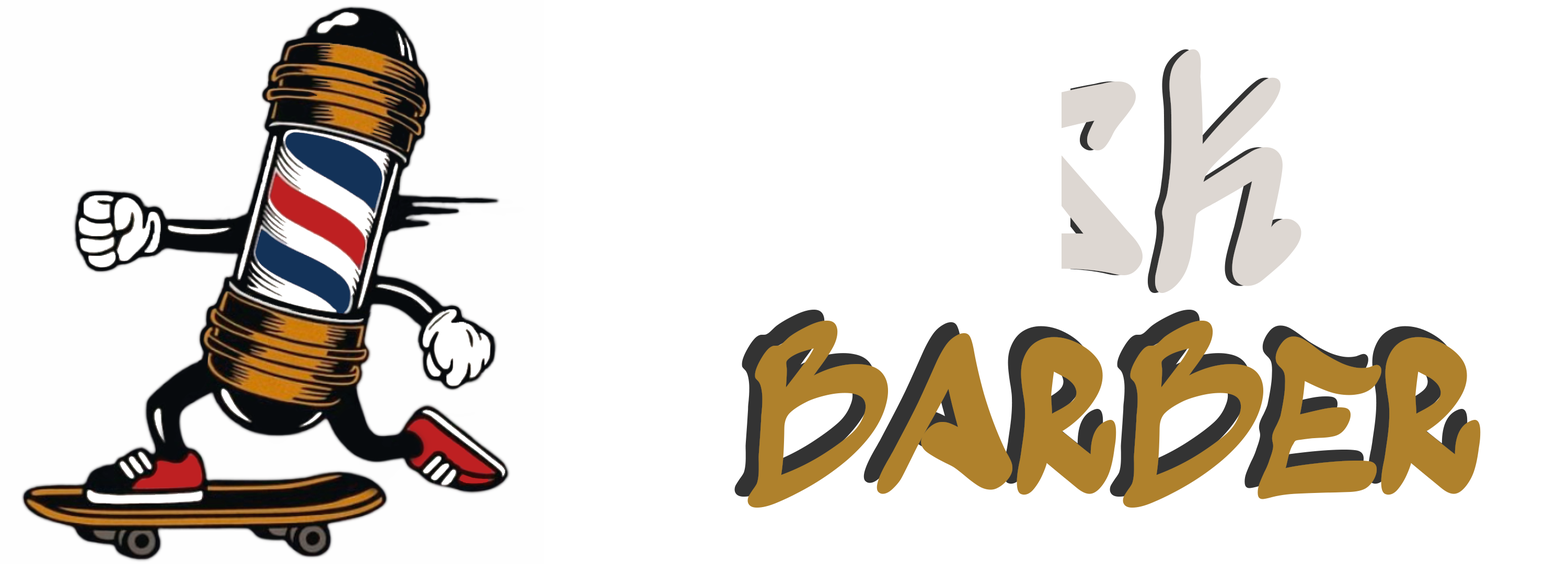
<style>
.page{position:relative;width:1568px;height:564px;background:#ffffff}
.page>*{position:absolute;margin:0}
.t1{font:261.3px "SedgwickAveDisplay-Regular";color:#ddd7d2}
.t2{font:209.1px "SedgwickAveDisplay-Regular"}
.t3{font:209.1px "SedgwickAveDisplay-Regular";color:#af812c}
</style>
<div class="page">
<p class="t1" style="left:1070px;top:49px;width:224px;height:244px">FELSK</p>
<p class="t2" style="left:734px;top:310px;width:734px;height:187px">BARBER</p>
<p class="t3" style="left:747px;top:321px;width:734px;height:187px">BARBER</p>
</div>
